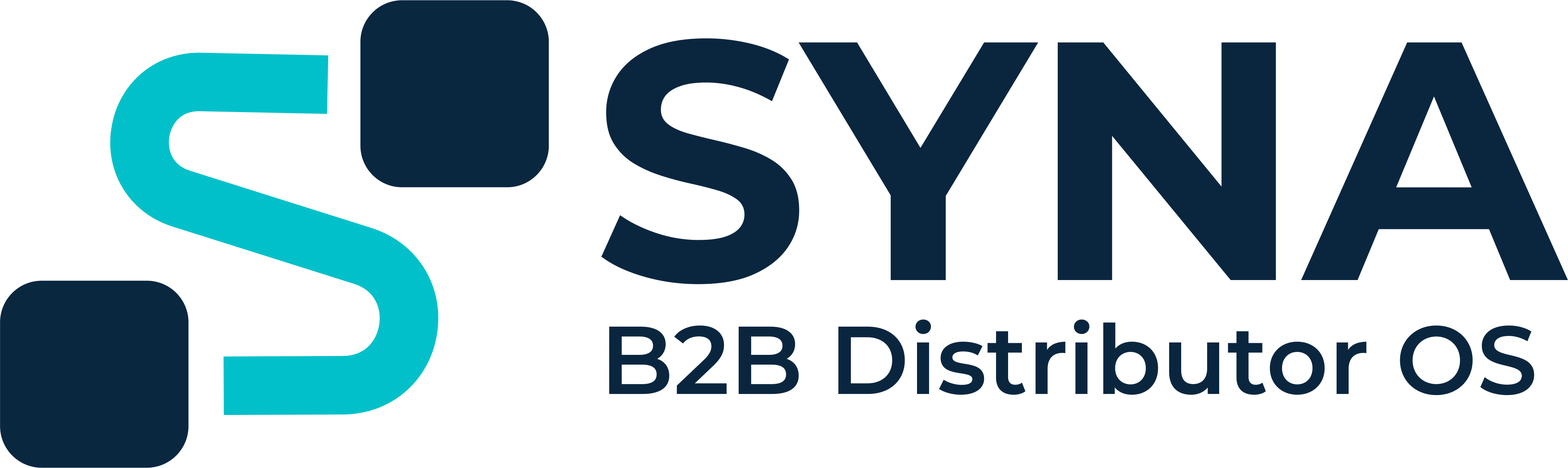
<style>
.page{position:relative;width:1568px;height:468px;background:#ffffff}
.page>*{position:absolute;margin:0}
.t1{font:339.9px "Montserrat-Bold";color:#0a2740}
.t2{font:96.4px "Montserrat-SemiBold";color:#0a2740}
</style>
<div class="page">
<p class="t1" style="left:601px;top:38px;width:967px;height:246px">SYNA</p>
<p class="t2" style="left:609px;top:320px;width:925px;height:75px">B2B Distributor OS</p>
</div>
